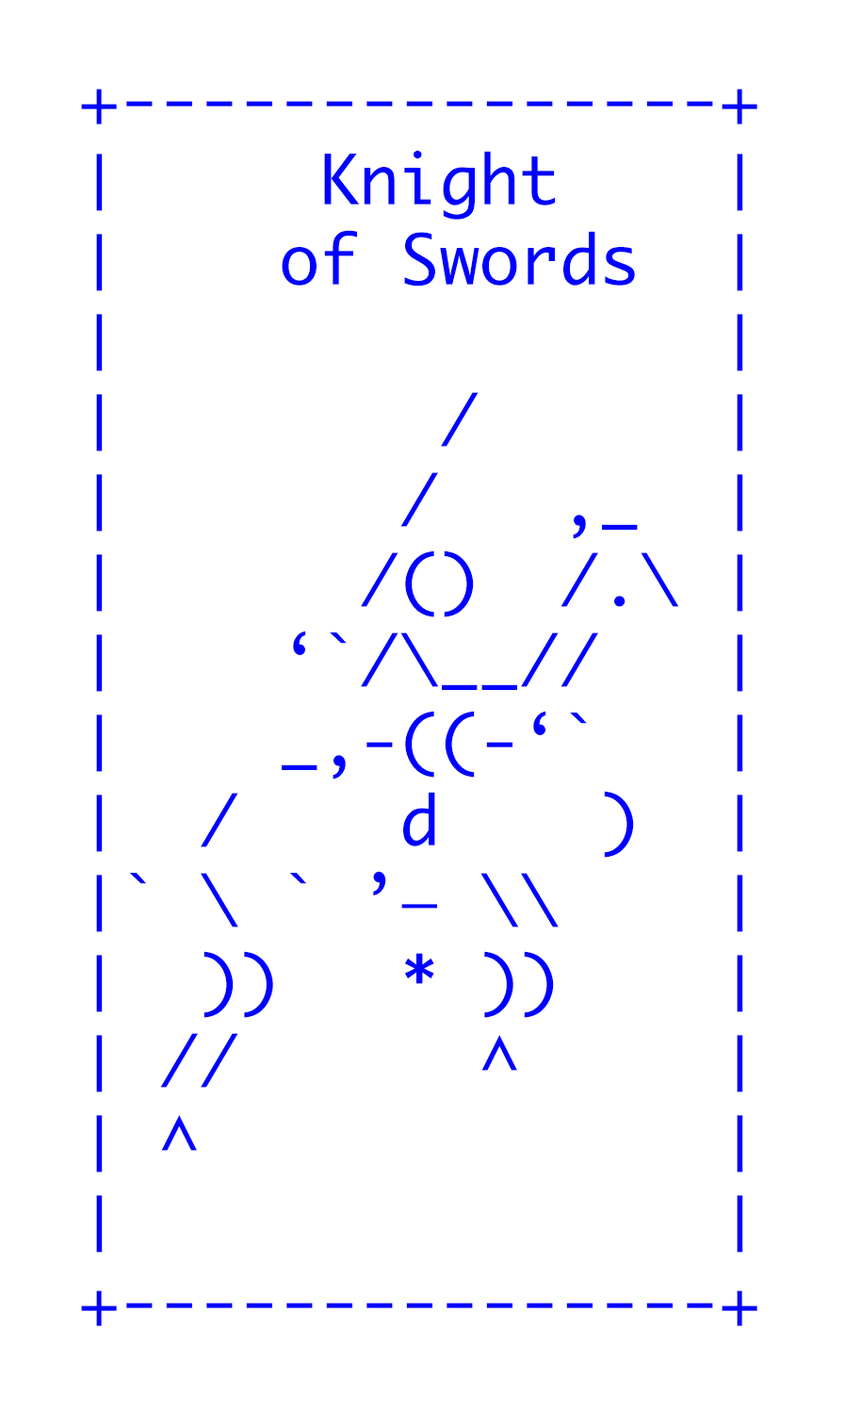
<style>
.page{position:relative;width:845px;height:1411px;background:#ffffff}
.page>*{position:absolute;margin:0}
.t1{font:66.7px "Monaco";color:#0000ff}
</style>
<div class="page">
<p class="t1" style="left:81px;top:89px;width:677px;height:1237px">+---------------+<br>│     Knight    │<br>│    of Swords  │<br>│               │<br>│        /      │<br>│       /   ,_  │<br>│      /()  /.\ │<br>│    ‘`/\__//   │<br>│    _,-((-‘`   │<br>│  /    d    )  │<br>│` \ ` ’— \\    │<br>│  ))   * ))    │      <br>│ //      ^     │<br>│ ^             │<br>│               │<br>+---------------+</p>
</div>
